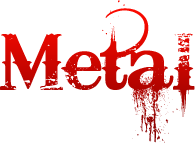
<style>
.page{position:relative;width:195px;height:143px;background:#ffffff}
.page>*{position:absolute;margin:0}
.t1{font:77.9px/92.8px "BleedingCowboys";color:#c20500}
</style>
<div class="page">
<p class="t1" style="left:0px;top:0px;width:195px;height:143px">Metal</p>
</div>
